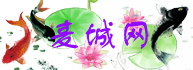
<style>
.page{position:relative;width:193px;height:70px}
.page>*{position:absolute;margin:0}
.t1{font:36px "FZSTK--GBK1-0";color:#9409ff}
</style>
<div class="page">
<p class="t1" style="left:50px;top:18px;width:98px;height:31px">麦城网</p>
</div>
